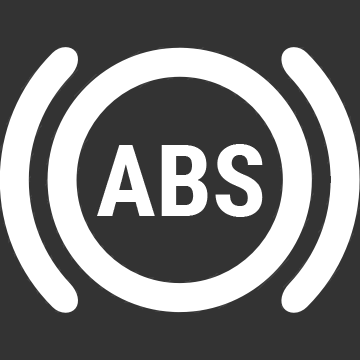
<style>
.page{position:relative;width:360px;height:360px;background:#333333}
.page>*{position:absolute;margin:0}
.t1{font:100px "RobotoCondensed-Bold";color:#ffffff}
</style>
<div class="page">
<p class="t1" style="left:97px;top:144px;width:166px;height:73px">ABS</p>
</div>
